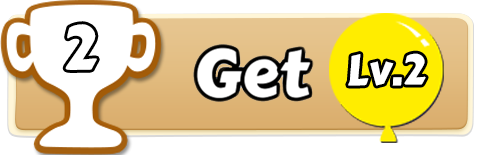
<style>
.page{position:relative;width:477px;height:155px;background:#ffffff}
.page>*{position:absolute;margin:0}
.t1{font:62.2px "CarterOne";color:#ffffff}
.t2{font:42.3px "CarterOne";color:#ffffff}
</style>
<div class="page">
<p class="t1" style="left:65px;top:24px;width:32px;height:46px">2</p>
<p class="t2" style="left:348px;top:53px;width:78px;height:33px">Lv.2</p>
</div>
